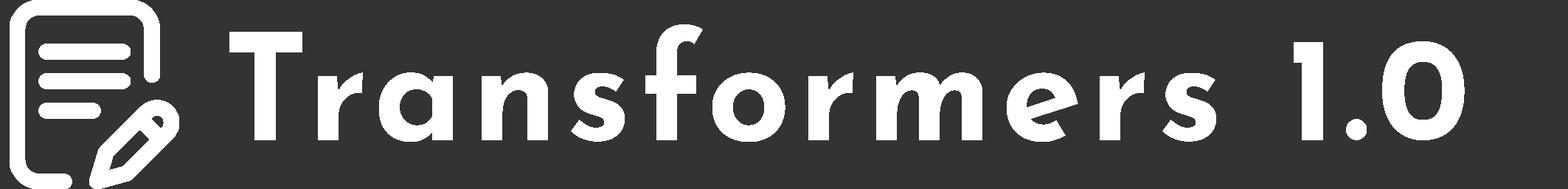
<style>
.page{position:relative;width:1568px;height:189px;background:#333333}
.page>*{position:absolute;margin:0}
.t1{font:147.5px "JosefinSans-Bold";letter-spacing:0.05em;color:#ffffff}
</style>
<div class="page">
<p class="t1" style="left:229px;top:24px;width:1236px;height:118px">Transformers 1.0</p>
</div>
